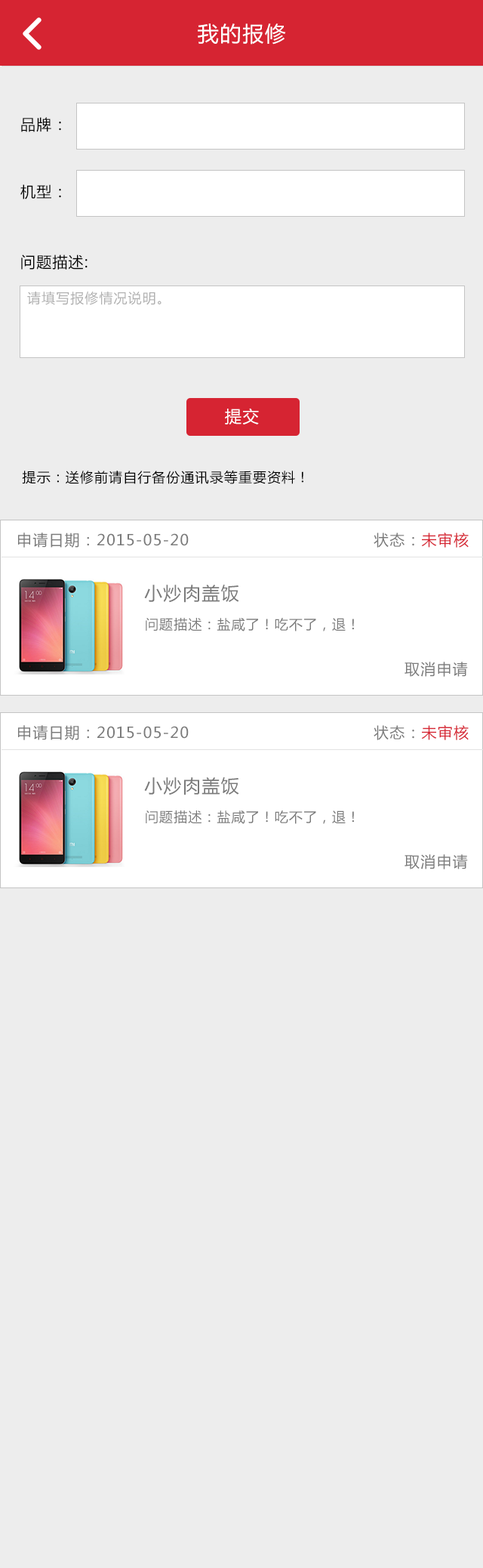
<style>
.page{position:relative;width:483px;height:1568px;background:#ededed}
.page>*{position:absolute;margin:0}
.t1{font:21.1px "MicrosoftYaHei";letter-spacing:0.06em;color:#ffffff}
.t2{font:15.1px "MicrosoftYaHei";letter-spacing:0.06em;color:#000000}
.t3{font:13.6px "MicrosoftYaHei";letter-spacing:0.06em;color:#b0b0b0}
.t4{font:16.6px "MicrosoftYaHei";letter-spacing:0.06em;color:#ffffff}
.t5{font:13.6px "MicrosoftYaHei";letter-spacing:0.06em;color:#000000}
.t6{font:15.1px "MicrosoftYaHei";letter-spacing:0.06em;color:#7a7a7a}
.t7{font:15.1px "MicrosoftYaHei";letter-spacing:0.06em;color:#d62432}
.t8{font:18.1px "MicrosoftYaHei";letter-spacing:0.06em;color:#7a7a7a}
.t9{font:13.6px "MicrosoftYaHei";letter-spacing:0.06em;color:#7a7a7a}
</style>
<div class="page">
<p class="t1" style="left:198px;top:23px;width:88px;height:22px">我的报修</p>
<p class="t2" style="left:21px;top:117px;width:40px;height:15px">品牌：</p>
<p class="t2" style="left:20px;top:184px;width:41px;height:15px">机型：</p>
<p class="t2" style="left:21px;top:255px;width:67px;height:15px">问题描述:</p>
<p class="t3" style="left:27px;top:292px;width:135px;height:13px">请填写报修情况说明。</p>
<p class="t4" style="left:225px;top:408px;width:34px;height:16px">提交</p>
<p class="t5" style="left:22px;top:471px;width:282px;height:13px">提示：送修前请自行备份通讯录等重要资料！</p>
<p class="t6" style="left:18px;top:532px;width:171px;height:16px">申请日期：2015-05-20</p>
<p class="t6" style="left:374px;top:532px;width:95px;height:16px">状态：<span class="t7">未审核</span></p>
<p class="t8" style="left:144px;top:585px;width:95px;height:18px">小炒肉盖饭</p>
<p class="t9" style="left:146px;top:618px;width:208px;height:13px">问题描述：盐咸了！吃不了，退！</p>
<p class="t6" style="left:405px;top:662px;width:63px;height:15px">取消申请</p>
<p class="t6" style="left:18px;top:725px;width:171px;height:15px">申请日期：2015-05-20</p>
<p class="t6" style="left:374px;top:725px;width:95px;height:15px">状态：<span class="t7">未审核</span></p>
<p class="t8" style="left:144px;top:777px;width:95px;height:18px">小炒肉盖饭</p>
<p class="t9" style="left:146px;top:810px;width:208px;height:14px">问题描述：盐咸了！吃不了，退！</p>
<p class="t6" style="left:405px;top:854px;width:63px;height:15px">取消申请</p>
</div>
